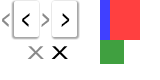
<style>
.page{position:relative;width:160px;height:80px;background:#ffffff}
.page>*{position:absolute;margin:0}
.t1{font:24px "Humanist521BT-Bold";color:#8a8a8a;font-style:italic;scale:0.5 1}
.t2{font:24px "Humanist521BT-Bold";color:#000000;font-style:italic;scale:0.5 1}
.t3{font:24px "OpenSans";color:#8a8a8a;scale:1.4 1}
.t4{font:24px "OpenSans";color:#000000;scale:1.4 1}
</style>
<div class="page">
<p class="t1" style="left:2px;top:13px;width:8px;height:14px">&lt;</p>
<p class="t2" style="left:22px;top:13px;width:8px;height:14px">&lt;</p>
<p class="t1" style="left:41px;top:13px;width:9px;height:14px">&gt;</p>
<p class="t2" style="left:61px;top:13px;width:9px;height:14px">&gt;</p>
<p class="t3" style="left:27px;top:46px;width:17px;height:13px">x</p>
<p class="t4" style="left:51px;top:46px;width:17px;height:13px">x</p>
</div>
